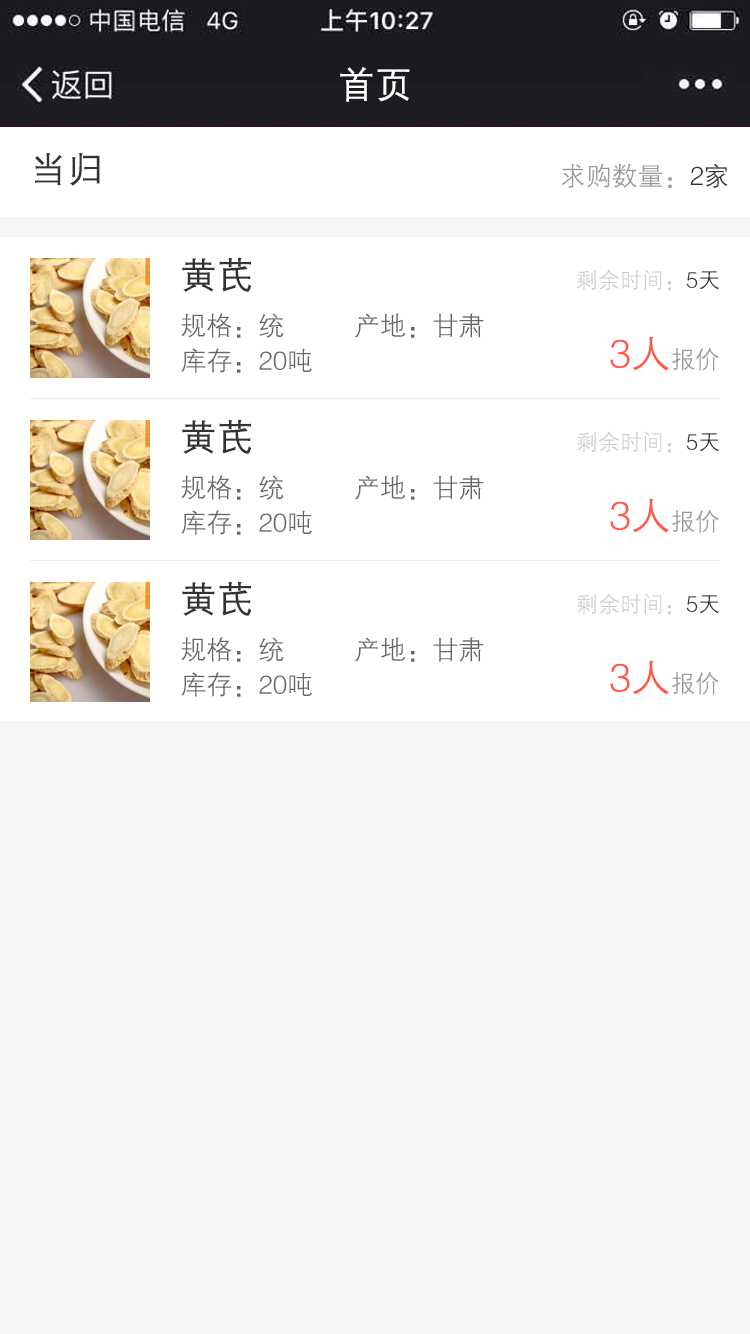
<style>
.page{position:relative;width:750px;height:1334px;background:#f5f5f5}
.page>*{position:absolute;margin:0}
.t1{font:36px "FZZDXJW--GB1-0";color:#ffffff;font-weight:bold}
.t2{font:36px "FZZDXJW--GB1-0";color:#333333;font-weight:bold}
.t3{font:26px "FZZDXJW--GB1-0";color:#999999}
.t4{font:26px "FZZDXJW--GB1-0";color:#333333}
.t5{font:22px "FZZDXJW--GB1-0";color:#cccccc}
.t6{font:22px "FZZDXJW--GB1-0";color:#333333}
.t7{font:26px "FZZDXJW--GB1-0";color:#666666}
.t8{font:40px "FZZDXJW--GB1-0";color:#ff5a49}
.t9{font:24px "FZZDXJW--GB1-0";color:#999999}
</style>
<div class="page">
<p class="t1" style="left:340px;top:67px;width:70px;height:35px">首页</p>
<p class="t2" style="left:35px;top:152px;width:65px;height:34px">当归</p>
<p class="t3" style="left:562px;top:163px;width:166px;height:25px">求购数量：<span class="t4">2家</span></p>
<p class="t2" style="left:182px;top:257px;width:69px;height:35px">黄芪</p>
<p class="t5" style="left:577px;top:269px;width:143px;height:22px">剩余时间：<span class="t6">5天</span></p>
<p class="t7" style="left:181px;top:313px;width:103px;height:25px">规格：统</p>
<p class="t7" style="left:355px;top:313px;width:129px;height:25px">产地：甘肃</p>
<p class="t8" style="left:610px;top:336px;width:109px;height:35px">3人<span class="t9">报价</span></p>
<p class="t7" style="left:181px;top:348px;width:131px;height:25px">库存：20吨</p>
<p class="t2" style="left:182px;top:419px;width:69px;height:35px">黄芪</p>
<p class="t5" style="left:577px;top:431px;width:143px;height:22px">剩余时间：<span class="t6">5天</span></p>
<p class="t7" style="left:181px;top:475px;width:103px;height:25px">规格：统</p>
<p class="t7" style="left:355px;top:475px;width:129px;height:25px">产地：甘肃</p>
<p class="t7" style="left:181px;top:510px;width:131px;height:25px">库存：20吨</p>
<p class="t8" style="left:610px;top:498px;width:109px;height:35px">3人<span class="t9">报价</span></p>
<p class="t2" style="left:182px;top:581px;width:69px;height:35px">黄芪</p>
<p class="t5" style="left:577px;top:593px;width:143px;height:22px">剩余时间：<span class="t6">5天</span></p>
<p class="t7" style="left:181px;top:637px;width:103px;height:25px">规格：统</p>
<p class="t7" style="left:355px;top:637px;width:129px;height:25px">产地：甘肃</p>
<p class="t8" style="left:610px;top:660px;width:109px;height:35px">3人<span class="t9">报价</span></p>
<p class="t7" style="left:181px;top:672px;width:131px;height:25px">库存：20吨</p>
</div>
